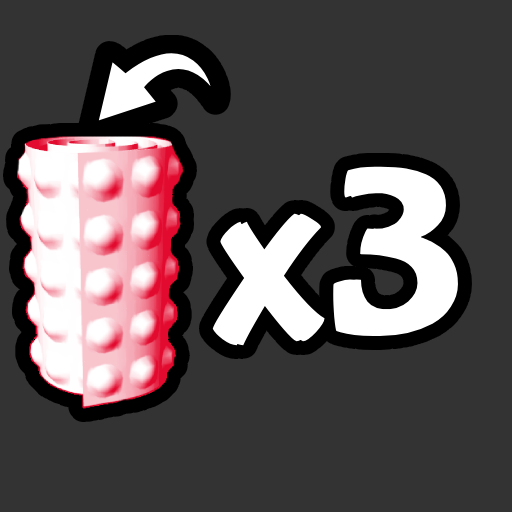
<style>
.page{position:relative;width:512px;height:512px;background:#333333}
.page>*{position:absolute;margin:0}
.t1{font:244.8px "BubblegumSans-Regular";color:#ffffff;font-weight:bold}
</style>
<div class="page">
<p class="t1" style="left:212px;top:166px;width:246px;height:180px">x3</p>
</div>
